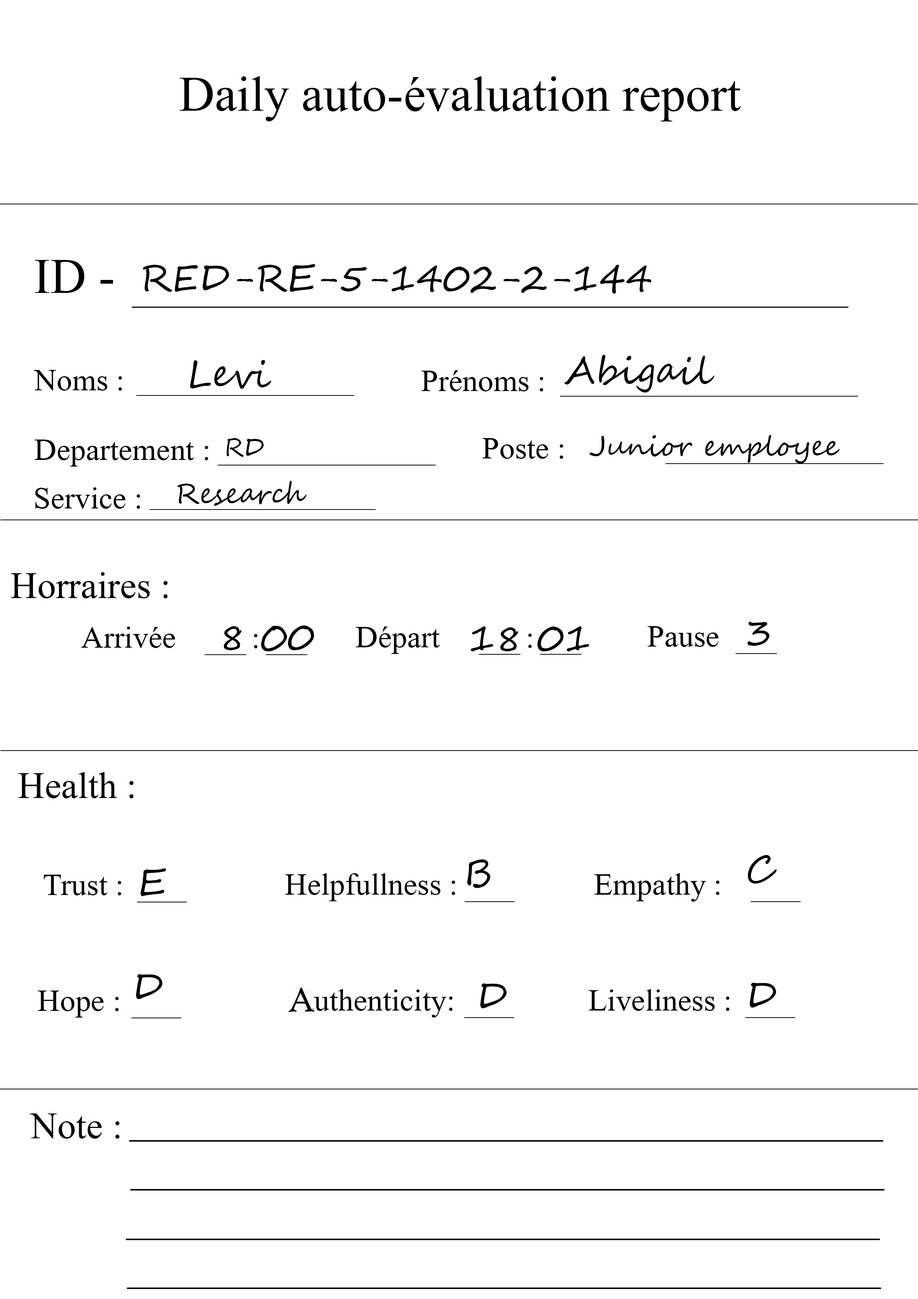
<style>
.page{position:relative;width:918px;height:1299px;background:#ffffff}
.page>*{position:absolute;margin:0}
.t1{font:74px "Microsoft-Himalaya";color:#000000}
.t2{font:37px "SegoeScript";color:#000000}
.t3{font:46.3px "Microsoft-Himalaya";color:#000000}
.t4{font:24.7px "SegoeScript";color:#000000}
.t5{font:27.8px "SegoeScript";color:#000000}
.t6{font:55.5px "Microsoft-Himalaya";color:#000000}
.t7{font:37px "HighTowerText-Reg";color:#000000}
</style>
<div class="page">
<p class="t1" style="left:180px;top:76px;width:561px;height:45px">Daily auto-évaluation report</p>
<p class="t1" style="left:35px;top:260px;width:78px;height:33px">ID -</p>
<p class="t2" style="left:143px;top:264px;width:509px;height:30px">RED-RE-5-1402-2-144</p>
<p class="t2" style="left:190px;top:360px;width:81px;height:29px">Levi</p>
<p class="t2" style="left:565px;top:355px;width:150px;height:37px">Abigail</p>
<p class="t3" style="left:34px;top:370px;width:88px;height:21px">Noms :</p>
<p class="t3" style="left:421px;top:370px;width:122px;height:21px">Prénoms :</p>
<p class="t4" style="left:227px;top:438px;width:37px;height:19px">RD</p>
<p class="t3" style="left:482px;top:438px;width:81px;height:21px">Poste :</p>
<p class="t5" style="left:589px;top:435px;width:251px;height:29px">Junior employee</p>
<p class="t3" style="left:34px;top:439px;width:174px;height:27px">Departement :</p>
<p class="t5" style="left:177px;top:481px;width:130px;height:25px">Research</p>
<p class="t3" style="left:35px;top:487px;width:105px;height:22px">Service :</p>
<p class="t6" style="left:11px;top:572px;width:157px;height:26px">Horraires :</p>
<p class="t3" style="left:81px;top:626px;width:94px;height:22px">Arrivée</p>
<p class="t2" style="left:224px;top:625px;width:90px;height:26px">8 00</p>
<p class="t3" style="left:356px;top:626px;width:84px;height:28px">Départ</p>
<p class="t2" style="left:471px;top:626px;width:118px;height:25px">18 01</p>
<p class="t3" style="left:648px;top:626px;width:71px;height:21px">Pause</p>
<p class="t2" style="left:747px;top:622px;width:23px;height:24px">3</p>
<p class="t3" style="left:254px;top:634px;width:4px;height:14px">:</p>
<p class="t3" style="left:528px;top:633px;width:4px;height:15px">:</p>
<p class="t6" style="left:18px;top:772px;width:116px;height:26px">Health :</p>
<p class="t2" style="left:748px;top:855px;width:29px;height:28px">C</p>
<p class="t2" style="left:140px;top:868px;width:26px;height:28px">E</p>
<p class="t2" style="left:467px;top:859px;width:24px;height:29px">B</p>
<p class="t3" style="left:44px;top:874px;width:77px;height:21px">Trust :</p>
<p class="t3" style="left:285px;top:873px;width:170px;height:28px">Helpfullness :</p>
<p class="t3" style="left:594px;top:873px;width:126px;height:28px">Empathy :</p>
<p class="t2" style="left:136px;top:974px;width:27px;height:25px">D</p>
<p class="t7" style="left:288px;top:987px;width:27px;height:25px">A</p>
<p class="t3" style="left:301px;top:989px;width:152px;height:28px">authenticity:</p>
<p class="t2" style="left:480px;top:983px;width:27px;height:25px">D</p>
<p class="t3" style="left:589px;top:989px;width:141px;height:22px">Liveliness :</p>
<p class="t2" style="left:750px;top:983px;width:26px;height:24px">D</p>
<p class="t3" style="left:38px;top:990px;width:81px;height:27px">Hope :</p>
<p class="t6" style="left:30px;top:1113px;width:90px;height:25px">Note :</p>
</div>
